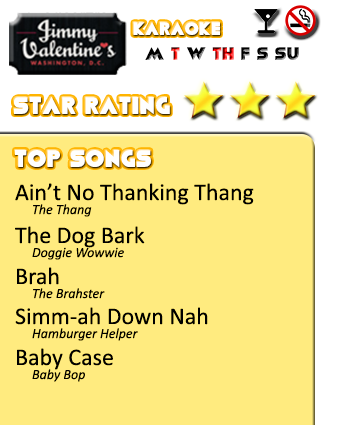
<style>
.page{position:relative;width:344px;height:425px;background:#ffeb7f}
.page>*{position:absolute;margin:0}
.t1{font:18px "Viafont";color:#ffffff}
.t2{font:18px "Viafont"}
.t3{font:24px "Viafont";color:#ffffff}
.t4{font:24px "Calibri";color:#000000}
.t5{font:14px "Calibri-Italic";color:#000000}
</style>
<div class="page">
<p class="t1" style="left:133px;top:22px;width:87px;height:13px">Karaoke</p>
<p class="t2" style="left:145px;top:47px;width:154px;height:13px">M T W Th F S Su</p>
<p class="t3" style="left:14px;top:97px;width:156px;height:17px">Star Rating</p>
<p class="t3" style="left:15px;top:150px;width:136px;height:17px">Top Songs</p>
<p class="t4" style="left:15px;top:183px;width:239px;height:22px">Ain’t No Thanking Thang</p>
<p class="t5" style="left:33px;top:204px;width:59px;height:13px">The Thang</p>
<p class="t4" style="left:15px;top:226px;width:130px;height:22px">The Dog Bark</p>
<p class="t5" style="left:32px;top:247px;width:92px;height:13px">Doggie Wowwie</p>
<p class="t4" style="left:17px;top:267px;width:42px;height:18px">Brah</p>
<p class="t5" style="left:33px;top:288px;width:72px;height:11px">The Brahster</p>
<p class="t4" style="left:15px;top:307px;width:193px;height:18px">Simm-ah Down Nah</p>
<p class="t5" style="left:32px;top:328px;width:106px;height:13px">Hamburger Helper</p>
<p class="t4" style="left:17px;top:348px;width:96px;height:22px">Baby Case</p>
<p class="t5" style="left:32px;top:369px;width:53px;height:13px">Baby Bop</p>
</div>
